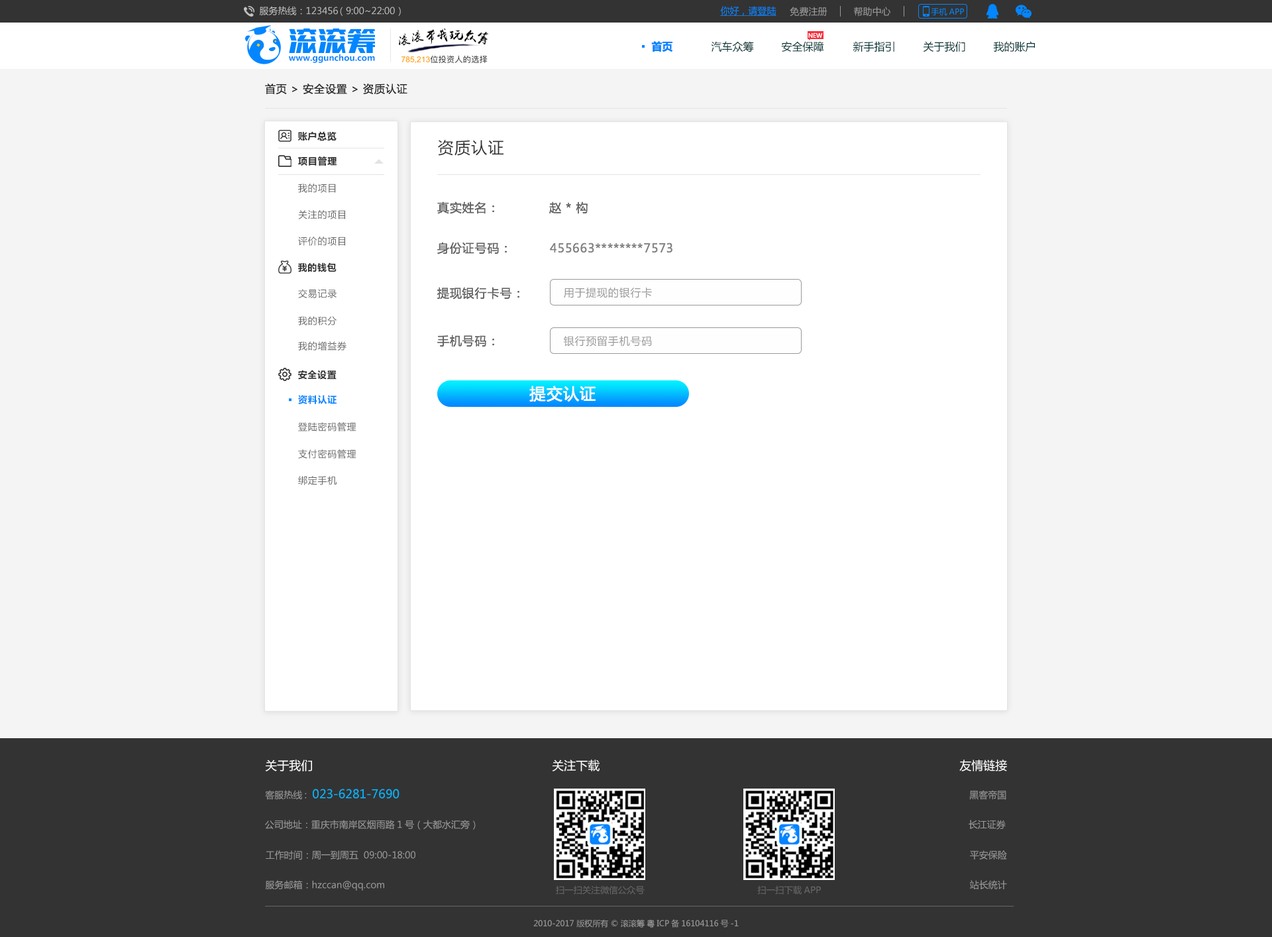
<style>
.page{position:relative;width:1272px;height:937px;background:#ffffff}
.page>*{position:absolute;margin:0}
.t1{font:9.3px "MicrosoftYaHei";color:#c4c4c4}
.t2{font:9.3px "MicrosoftYaHei";color:#0386ff;text-decoration:underline}
.t3{font:9.3px "MicrosoftYaHei";color:#999999}
.t4{font:8px "MicrosoftYaHei";color:#0386ff}
.t5{font:10.6px "MicrosoftYaHei-Bold";color:#0386ff}
.t6{font:10.6px "MicrosoftYaHei";color:#033333}
.t7{font:6px "MicrosoftYaHei";color:#ffffff}
.t8{font:8.3px "MicrosoftYaHei-Bold";color:#0386ff}
.t9{font:10.6px "MicrosoftYaHei";letter-spacing:0.05em;color:#333333}
.t10{font:9.3px "MicrosoftYaHei-Bold";letter-spacing:0.05em;color:#333333}
.t11{font:15.9px "MicrosoftYaHei";letter-spacing:0.05em;color:#333333}
.t12{font:9.3px "MicrosoftYaHei";letter-spacing:0.05em;color:#666666}
.t13{font:11.9px "MicrosoftYaHei";letter-spacing:0.05em;color:#666666}
.t14{font:11.9px "MicrosoftYaHei";letter-spacing:0.05em;color:#848484}
.t15{font:10.6px "MicrosoftYaHei";letter-spacing:0.05em;color:#999999}
.t16{font:15.9px "MicrosoftYaHei";letter-spacing:0.05em;color:#ffffff}
.t17{font:9.3px "MicrosoftYaHei-Bold";letter-spacing:0.05em;color:#0386ff}
.t18{font:11.9px "MicrosoftYaHei";color:#fffefe}
.t19{font:11.9px "MicrosoftYaHei";color:#03b6ff}
.t20{font:8.9px "MicrosoftYaHei";color:#666666}
.t21{font:8px "MicrosoftYaHei";color:#999999}
</style>
<div class="page">
<p class="t1" style="left:259px;top:6px;width:142px;height:10px">服务热线：123456 （9:00~22:00）</p>
<p class="t2" style="left:720px;top:6px;width:57px;height:10px">你好，请登陆</p>
<p class="t3" style="left:790px;top:7px;width:38px;height:10px">免费注册</p>
<p class="t3" style="left:854px;top:7px;width:37px;height:10px">帮助中心</p>
<p class="t4" style="left:931px;top:8px;width:33px;height:8px">手机APP</p>
<p class="t5" style="left:651px;top:41px;width:22px;height:11px">首页</p>
<p class="t6" style="left:711px;top:41px;width:43px;height:11px">汽车众筹</p>
<p class="t6" style="left:781px;top:41px;width:43px;height:11px">安全保障</p>
<p class="t7" style="left:809px;top:32px;width:14px;height:6px">NEW</p>
<p class="t6" style="left:853px;top:41px;width:42px;height:11px">新手指引</p>
<p class="t6" style="left:923px;top:41px;width:43px;height:11px">关于我们</p>
<p class="t6" style="left:993px;top:41px;width:42px;height:11px">我的账户</p>
<p class="t8" style="left:289px;top:54px;width:86px;height:9px">www.ggunchou.com</p>
<p class="t9" style="left:265px;top:84px;width:143px;height:11px">首页 &gt; 安全设置 &gt; 资质认证</p>
<p class="t10" style="left:298px;top:131px;width:39px;height:10px">账户总览</p>
<p class="t11" style="left:438px;top:140px;width:66px;height:16px">资质认证</p>
<p class="t10" style="left:298px;top:156px;width:39px;height:10px">项目管理</p>
<p class="t12" style="left:298px;top:184px;width:38px;height:9px">我的项目</p>
<p class="t13" style="left:437px;top:201px;width:57px;height:13px">真实姓名：</p>
<p class="t13" style="left:549px;top:201px;width:39px;height:13px">赵 * 构</p>
<p class="t12" style="left:298px;top:210px;width:47px;height:9px">关注的项目</p>
<p class="t12" style="left:298px;top:237px;width:47px;height:9px">评价的项目</p>
<p class="t13" style="left:437px;top:242px;width:70px;height:12px">身份证号码：</p>
<p class="t14" style="left:550px;top:243px;width:123px;height:10px">455663********7573</p>
<p class="t10" style="left:298px;top:262px;width:39px;height:10px">我的钱包</p>
<p class="t12" style="left:298px;top:289px;width:39px;height:9px">交易记录</p>
<p class="t13" style="left:437px;top:287px;width:83px;height:13px">提现银行卡号：</p>
<p class="t15" style="left:564px;top:288px;width:88px;height:10px">用于提现的银行卡</p>
<p class="t12" style="left:298px;top:316px;width:39px;height:9px">我的积分</p>
<p class="t12" style="left:298px;top:341px;width:49px;height:10px">我的增益券</p>
<p class="t13" style="left:437px;top:335px;width:57px;height:12px">手机号码：</p>
<p class="t15" style="left:564px;top:336px;width:88px;height:11px">银行预留手机号码</p>
<p class="t10" style="left:298px;top:370px;width:39px;height:10px">安全设置</p>
<p class="t16" style="left:530px;top:386px;width:66px;height:16px">提交认证</p>
<p class="t17" style="left:298px;top:395px;width:39px;height:9px">资料认证</p>
<p class="t12" style="left:298px;top:422px;width:59px;height:9px">登陆密码管理</p>
<p class="t12" style="left:298px;top:449px;width:59px;height:10px">支付密码管理</p>
<p class="t12" style="left:298px;top:476px;width:39px;height:9px">绑定手机</p>
<p class="t18" style="left:265px;top:759px;width:47px;height:12px">关于我们</p>
<p class="t18" style="left:552px;top:759px;width:48px;height:12px">关注下载</p>
<p class="t18" style="left:960px;top:759px;width:47px;height:12px">友情链接</p>
<p class="t19" style="left:265px;top:789px;width:135px;height:11px"><span class="t3">客服热线:  </span>023-6281-7690</p>
<p class="t3" style="left:970px;top:790px;width:37px;height:10px">黑客帝国</p>
<p class="t3" style="left:265px;top:820px;width:211px;height:10px">公司地址：重庆市南岸区烟雨路1号（大都水汇旁）</p>
<p class="t3" style="left:969px;top:820px;width:37px;height:10px">长江证券</p>
<p class="t3" style="left:266px;top:850px;width:150px;height:10px">工作时间：周一到周五  09:00-18:00</p>
<p class="t3" style="left:970px;top:850px;width:37px;height:10px">平安保险</p>
<p class="t3" style="left:265px;top:880px;width:119px;height:11px">服务邮箱：hzccan@qq.com</p>
<p class="t3" style="left:970px;top:880px;width:37px;height:9px">站长统计</p>
<p class="t20" style="left:556px;top:885px;width:89px;height:10px">扫一扫关注微信公众号</p>
<p class="t20" style="left:758px;top:885px;width:63px;height:10px">扫一扫下载APP</p>
<p class="t21" style="left:534px;top:919px;width:205px;height:9px">2010-2017 版权所有 © 滚滚筹 粤ICP备16104116号-1</p>
</div>
